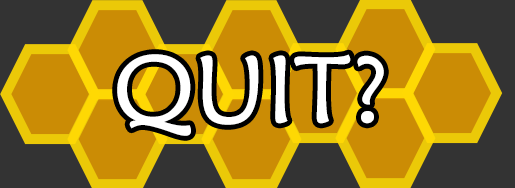
<style>
.page{position:relative;width:515px;height:188px;background:#cb8c05}
.page>*{position:absolute;margin:0}
.t1{font:96px "MaiandraGD-Regular";color:#ffffff}
</style>
<div class="page">
<p class="t1" style="left:117px;top:54px;width:267px;height:82px">QUIT?</p>
</div>
